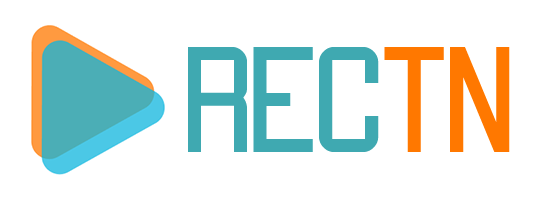
<style>
.page{position:relative;width:540px;height:200px;background:#ffffff}
.page>*{position:absolute;margin:0}
.t1{font:150px "MALDININORMAL";color:#3fa9b1}
.t2{font:150px "MALDININORMAL";color:#ff7800}
</style>
<div class="page">
<p class="t1" style="left:188px;top:47px;width:322px;height:105px">REC<span class="t2">TN</span></p>
</div>
